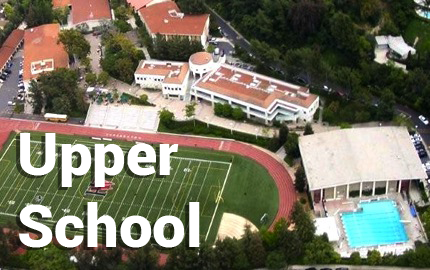
<style>
.page{position:relative;width:430px;height:270px}
.page>*{position:absolute;margin:0}
.t1{font:60px "Roboto-Black";color:#ffffff}
</style>
<div class="page">
<p class="t1" style="left:19px;top:133px;width:181px;height:115px">Upper<br>School</p>
</div>
